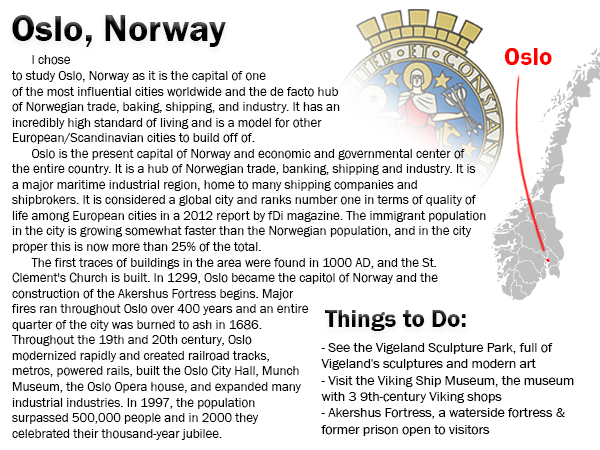
<style>
.page{position:relative;width:600px;height:450px;background:#ffffff}
.page>*{position:absolute;margin:0}
.t1{font:38.1px "FranklinGothic-Demi";color:#000000}
.t2{font:25.5px "FranklinGothic-Demi";color:#ff0000}
.t3{font:13px "FranklinGothic-Book";color:#000000}
.t4{font:25px "FranklinGothic-Demi";color:#000000}
.t5{font:13.6px "FranklinGothic-Book";color:#000000}
</style>
<div class="page">
<p class="t1" style="left:12px;top:15px;width:214px;height:32px">Oslo, Norway</p>
<p class="t2" style="left:504px;top:47px;width:48px;height:19px">Oslo</p>
<p class="t3" style="left:12px;top:55px;width:474px;height:385px">I chose to study Oslo, Norway as it is the capital of one of the most influential cities worldwide and the de facto hub of Norwegian trade, baking, shipping, and industry. It has an incredibly high standard of living and is a model for other European/Scandinavian cities to build off of.<br>      Oslo is the present capital of Norway and economic and governmental center of the entire country. It is a hub of Norwegian trade, banking, shipping and industry. It is a major maritime industrial region, home to many shipping companies and shipbrokers. It is considered a global city and ranks number one in terms of quality of life among European cities in a 2012 report by fDi magazine. The immigrant population in the city is growing somewhat faster than the Norwegian population, and in the city proper this is now more than 25% of the total.<br>      The first traces of buildings in the area were found in 1000 AD, and the St. Clement's Church is built. In 1299, Oslo became the capitol of Norway and the construction of the Akershus Fortress begins. Major fires ran throughout Oslo over 400 years and an entire quarter of the city was burned to ash in 1686. Throughout the 19th and 20th century, Oslo modernized rapidly and created railroad tracks, metros, powered rails, built the Oslo City Hall, Munch Museum, the Oslo Opera house, and expanded many industrial industries. In 1997, the population surpassed 500,000 people and in 2000 they celebrated their thousand-year jubilee.</p>
<p class="t4" style="left:325px;top:310px;width:141px;height:21px">Things to Do:</p>
<p class="t5" style="left:321px;top:343px;width:253px;height:93px">- See the Vigeland Sculpture Park, full of Vigeland's sculptures and modern art<br>- Visit the Viking Ship Museum, the museum with 3 9th-century Viking shops<br>- Akershus Fortress, a waterside fortress &amp; former prison open to visitors</p>
</div>
